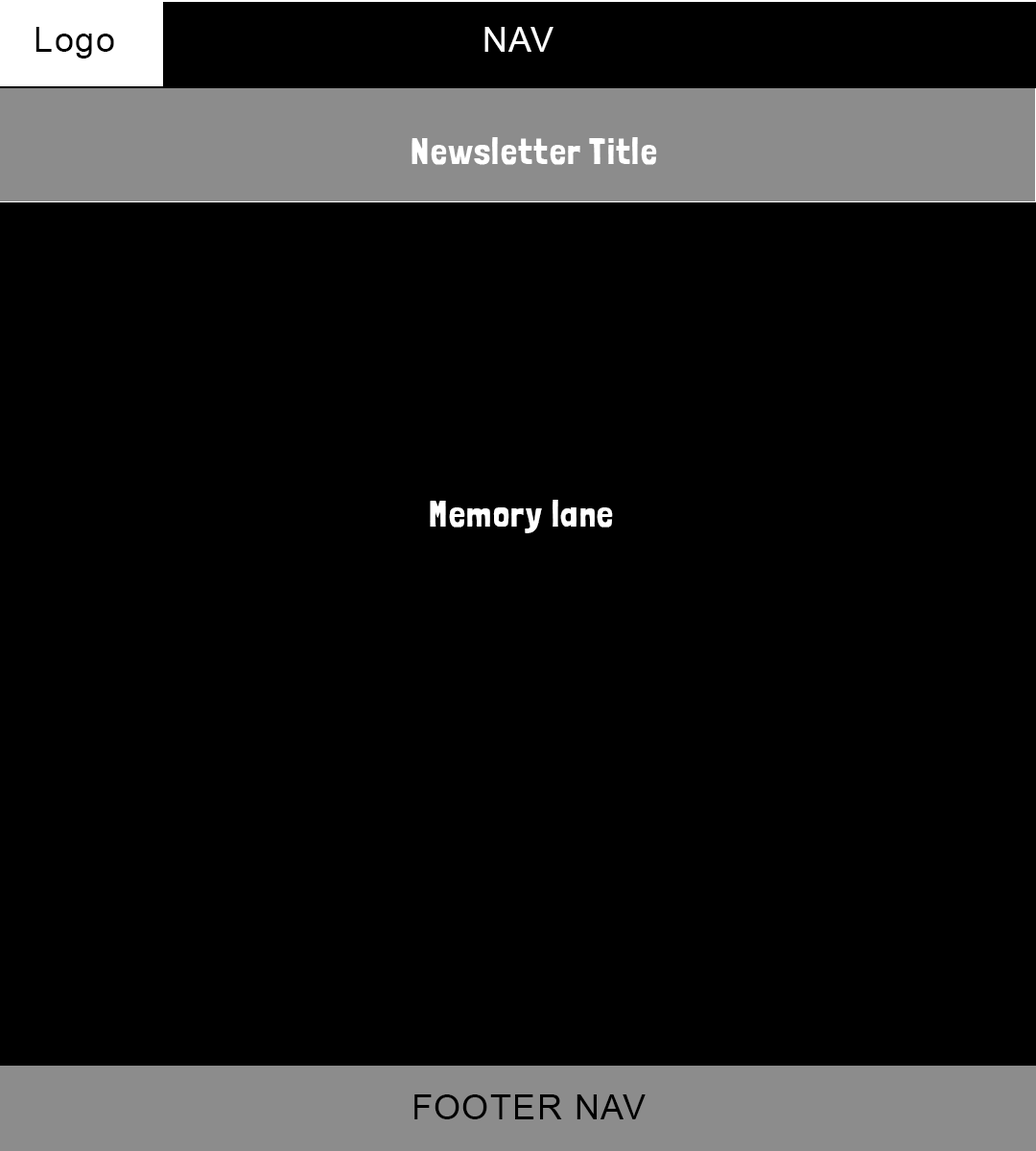
<style>
.page{position:relative;width:1036px;height:1151px;background:#000000}
.page>*{position:absolute;margin:0}
.t1{font:34.5px "ArialMT";letter-spacing:0.04em;color:#000000}
.t2{font:34.5px "ArialMT";letter-spacing:0.04em;color:#ffffff}
.t3{font:36.5px "LondrinaSolid-Regular";letter-spacing:0.04em;color:#ffffff}
</style>
<div class="page">
<p class="t1" style="left:35px;top:27px;width:79px;height:32px">Logo</p>
<p class="t2" style="left:484px;top:27px;width:69px;height:25px">NAV</p>
<p class="t3" style="left:412px;top:137px;width:245px;height:28px">Newsletter Title</p>
<p class="t3" style="left:430px;top:500px;width:183px;height:33px">Memory lane</p>
<p class="t1" style="left:414px;top:1094px;width:232px;height:25px">FOOTER NAV</p>
</div>
